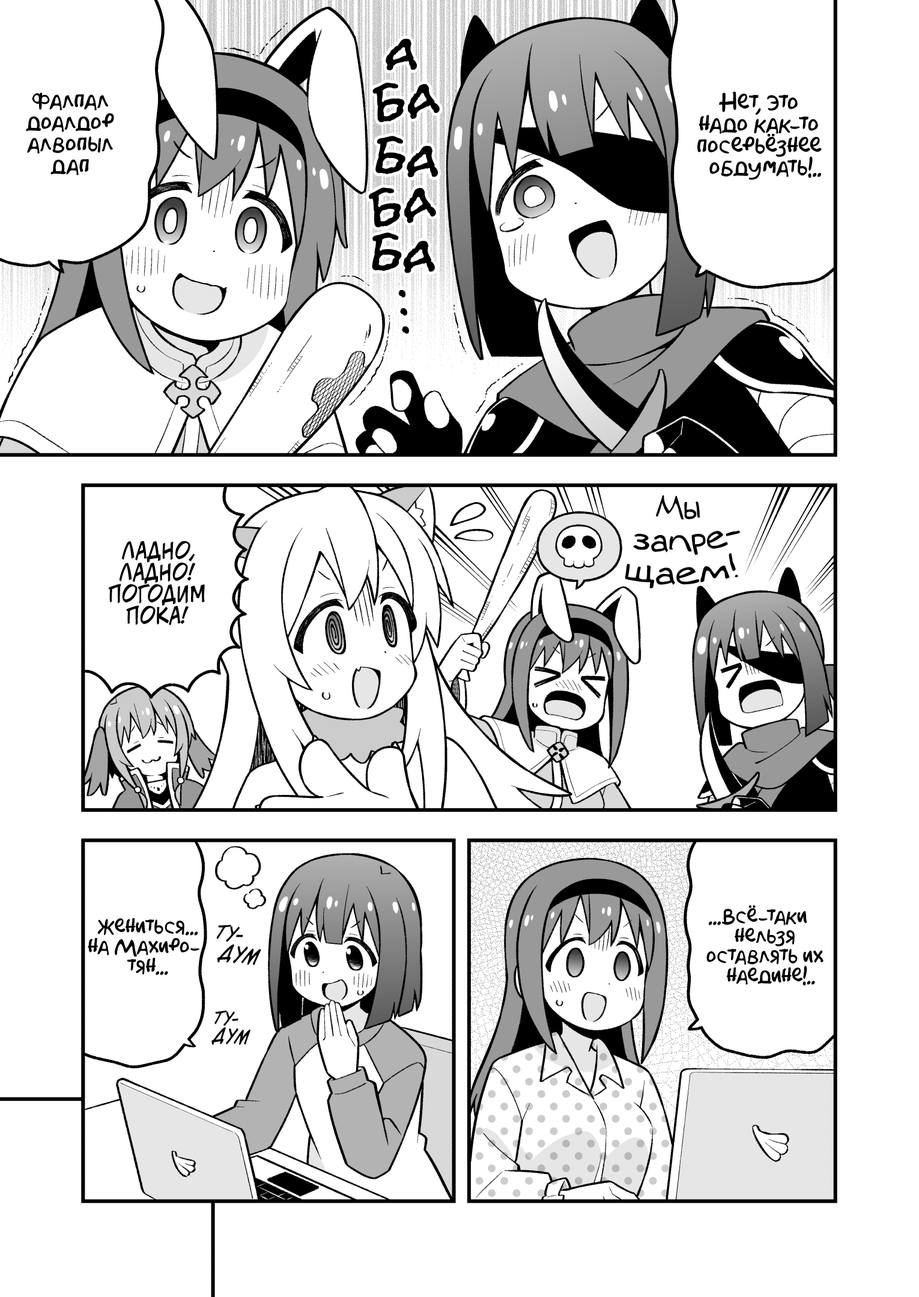
<style>
.page{position:relative;width:919px;height:1297px;background:#ffffff}
.page>*{position:absolute;margin:0}
.t1{font:54.1px "el_CCEvilSchemes";color:#000000}
.t2{font:21.6px "AkbarPlain";color:#000000}
.t3{font:45.1px "el_CCEvilSchemes";letter-spacing:0.2em;color:#000000}
.t4{font:32.4px "v_Augie";color:#000000;scale:0.8 1}
.t5{font:21.6px "v_CCJeffCampbell";color:#000000;text-transform:uppercase}
.t6{font:19.8px "AkbarPlain";color:#000000}
.t7{font:18px "v_CCDearDiary";color:#000000;text-transform:uppercase}
.t8{font:19.8px "v_CCDearDiary";color:#000000;text-transform:uppercase}
.t9{font:16.2px "v_CCDearDiary";color:#000000;text-transform:uppercase}
</style>
<div class="page">
<p class="t1" style="left:386px;top:38px;width:31px;height:32px;rotate:8deg">а</p>
<p class="t1" style="left:372px;top:82px;width:68px;height:41px;rotate:-5deg">ба</p>
<p class="t2" style="left:26px;top:93px;width:88px;height:82px;text-align:center">фалпал<br>доалдор<br>алвопыл<br>дап</p>
<p class="t2" style="left:697px;top:91px;width:125px;height:89px;text-align:center">Нет, это<br>надо как-то<br>посерьёзнее<br>обдумать!..</p>
<p class="t1" style="left:375px;top:136px;width:63px;height:41px;rotate:8deg">ба</p>
<p class="t1" style="left:369px;top:187px;width:67px;height:41px;rotate:-7deg">ба</p>
<p class="t1" style="left:372px;top:232px;width:63px;height:41px;rotate:6deg">ба</p>
<p class="t3" style="left:398px;top:290px;width:11px;height:44px;rotate:85deg">...</p>
<p class="t4" style="left:625px;top:496px;width:115px;height:93px;text-align:center;rotate:-3deg">Мы<br>запре-<br>щаем!</p>
<p class="t5" style="left:108px;top:541px;width:97px;height:85px;text-align:center">Ладно,<br>ладно!<br>Погодим<br>пока!</p>
<p class="t6" style="left:706px;top:905px;width:118px;height:81px;text-align:center">...Всё-таки<br>нельзя<br>оставлять их<br>наедине!..</p>
<p class="t6" style="left:88px;top:918px;width:112px;height:58px;text-align:center">Жениться...<br>на Махиро-<br>тян...</p>
<p class="t7" style="left:216px;top:925px;width:45px;height:40px;text-align:center;rotate:10deg">ту-<br><span class="t8">дум</span></p>
<p class="t9" style="left:211px;top:1010px;width:39px;height:35px;text-align:center;rotate:5deg">ту-<br><span class="t7">дум</span></p>
</div>
